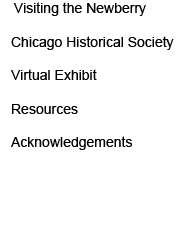
<style>
.page{position:relative;width:187px;height:250px;background:#ffffff}
.page>*{position:absolute;margin:0}
.t1{font:14px "ArialMT";color:#000000}
</style>
<div class="page">
<p class="t1" style="left:11px;top:2px;width:163px;height:148px;text-align:justify">Visiting the Newberry<br><br>Chicago Historical Society<br><br>Virtual Exhibit<br><br>Resources<br><br>Acknowledgements</p>
</div>
